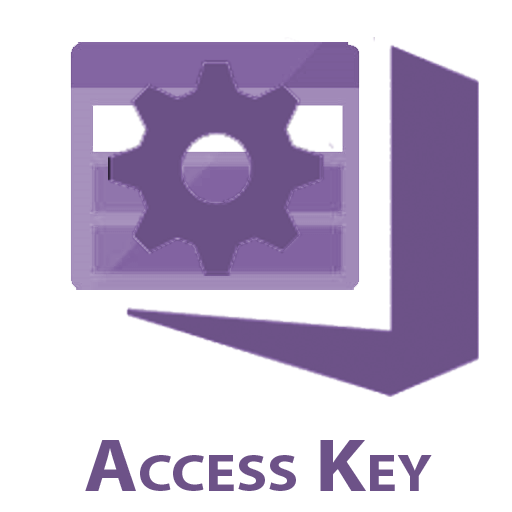
<style>
.page{position:relative;width:512px;height:512px;background:#ffffff}
.page>*{position:absolute;margin:0}
.t1{font:75px "MyriadPro-Bold";color:#6d5288;font-variant:small-caps;scale:1.1 1}
</style>
<div class="page">
<p class="t1" style="left:85px;top:440px;width:347px;height:51px">Access Key</p>
</div>
